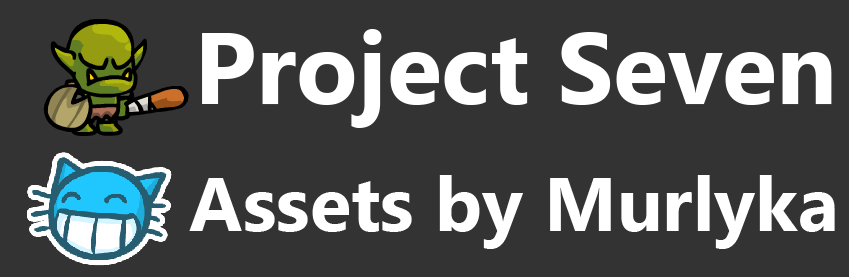
<style>
.page{position:relative;width:849px;height:277px;background:#333333}
.page>*{position:absolute;margin:0}
.t1{font:101px "SegoeUI-Bold";color:#ffffff}
.t2{font:76px "SegoeUI-Bold";color:#ffffff}
</style>
<div class="page">
<p class="t1" style="left:202px;top:29px;width:630px;height:99px">Project Seven</p>
<p class="t2" style="left:189px;top:175px;width:646px;height:74px">Assets by Murlyka</p>
</div>
